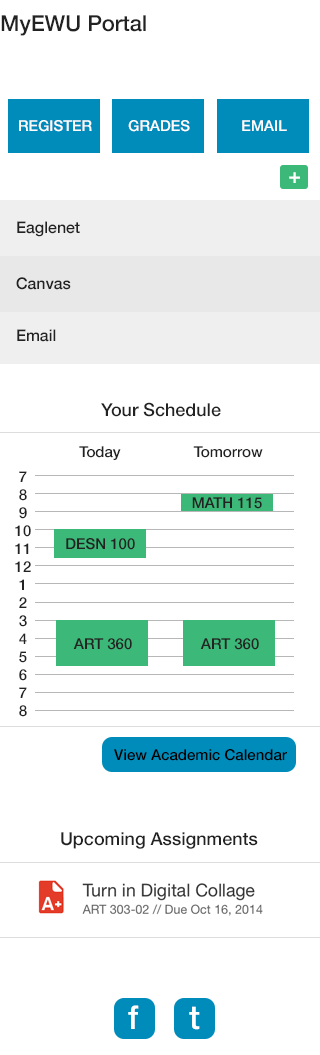
<style>
.page{position:relative;width:320px;height:1055px;background:#ffffff}
.page>*{position:absolute;margin:0}
.t1{font:22px "HelveticaNeue-Medium";color:#222222}
.t2{font:15px "HelveticaNeue-Medium";color:#ffffff}
.t3{font:21px "HelveticaNeue-Medium";color:#ffffff}
.t4{font:16px "HelveticaNeue-Medium";color:#222222}
.t5{font:18px "HelveticaNeue-Medium";color:#222222}
.t6{font:15px "HelveticaNeue-Medium";color:#222222}
.t7{font:15px "HelveticaNeue-Medium";color:#000000}
.t8{font:33px "HelveticaNeue-Medium";color:#ffffff}
</style>
<div class="page">
<p class="t1" style="left:1px;top:15px;width:145px;height:21px">MyEWU Portal</p>
<p class="t2" style="left:19px;top:120px;width:73px;height:12px">REGISTER</p>
<p class="t2" style="left:128px;top:120px;width:62px;height:12px">GRADES</p>
<p class="t2" style="left:242px;top:120px;width:45px;height:11px">EMAIL</p>
<p class="t3" style="left:289px;top:172px;width:11px;height:11px">+</p>
<p class="t4" style="left:17px;top:221px;width:63px;height:16px">Eaglenet</p>
<p class="t4" style="left:16px;top:277px;width:55px;height:13px">Canvas</p>
<p class="t4" style="left:17px;top:329px;width:39px;height:13px">Email</p>
<p class="t5" style="left:101px;top:402px;width:120px;height:15px">Your Schedule</p>
<p class="t6" style="left:79px;top:446px;width:42px;height:14px">Today</p>
<p class="t6" style="left:193px;top:446px;width:70px;height:12px">Tomorrow</p>
<p class="t6" style="left:15px;top:471px;width:16px;height:246px;text-align:center">7<br>8<br>9<br>10<br>11<br>12<br>1<br>2<br>3<br>4<br>5<br>6<br>7<br>8</p>
<p class="t6" style="left:192px;top:497px;width:70px;height:12px">MATH 115</p>
<p class="t6" style="left:66px;top:538px;width:69px;height:12px">DESN 100</p>
<p class="t6" style="left:73px;top:638px;width:59px;height:12px">ART 360</p>
<p class="t6" style="left:200px;top:638px;width:59px;height:12px">ART 360</p>
<p class="t7" style="left:114px;top:749px;width:173px;height:12px">View Academic Calendar</p>
<p class="t5" style="left:61px;top:832px;width:197px;height:17px">Upcoming Assignments</p>
<p class="t8" style="left:128px;top:1005px;width:11px;height:24px">f</p>
<p class="t8" style="left:189px;top:1006px;width:11px;height:24px">t</p>
</div>
